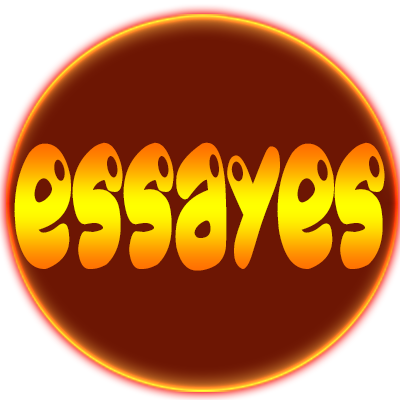
<style>
.page{position:relative;width:400px;height:400px;background:#6d1603}
.page>*{position:absolute;margin:0}
.t1{font:131.5px "JuicyFruity";scale:0.46 1}
</style>
<div class="page">
<p class="t1" style="left:14px;top:142px;width:371px;height:129px">essayes</p>
</div>
